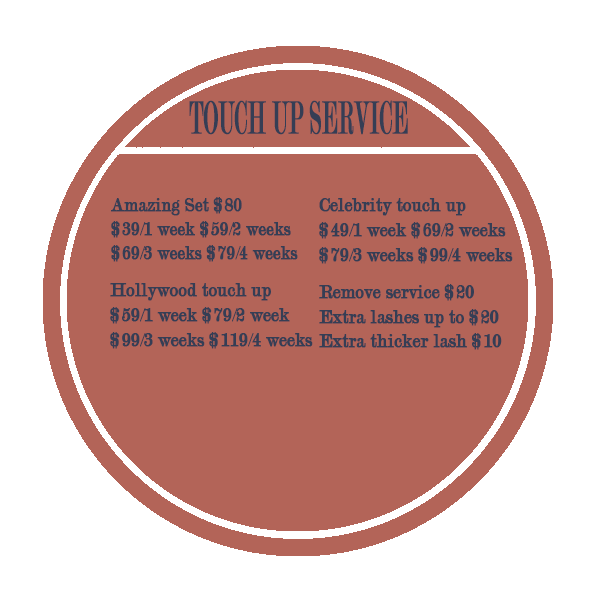
<style>
.page{position:relative;width:600px;height:600px;background:#b36458}
.page>*{position:absolute;margin:0}
.t1{font:49.4px "Modern-Regular";color:#353e55;font-weight:bold;scale:0.45 1}
.t2{font:20.1px "Modern-Regular";color:#353e55;font-weight:bold;scale:0.9 1}
.t3{font:20.7px "Modern-Regular";color:#353e55;font-weight:bold;scale:0.91 1}
.t4{font:20.8px "Modern-Regular";color:#353e55;font-weight:bold;scale:0.9 1}
</style>
<div class="page">
<p class="t1" style="left:189px;top:100px;width:219px;height:35px">TOUCH UP SERVICE</p>
<p class="t2" style="left:111px;top:197px;width:187px;height:65px">Amazing Set $80<br>$39/1 week $59/2 weeks<br>$69/3 weeks $79/4 weeks</p>
<p class="t3" style="left:319px;top:198px;width:194px;height:66px">Celebrity touch up<br>$49/1 week $69/2 weeks<br>$79/3 weeks $99/4 weeks</p>
<p class="t3" style="left:110px;top:283px;width:203px;height:66px">Hollywood touch up<br>$59/1 week $79/2 week<br>$99/3 weeks $119/4 weeks</p>
<p class="t4" style="left:319px;top:284px;width:183px;height:66px">Remove service $20<br>Extra lashes up to $20<br>Extra thicker lash $10</p>
</div>
